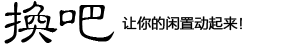
<style>
.page{position:relative;width:300px;height:46px;background:#ffffff}
.page>*{position:absolute;margin:0}
.t1{font:62px "STLibian-SC-Regular";letter-spacing:-0.1em;color:#000000}
.t2{font:14px "FZLTXHK--GBK1-0";color:#000000;font-weight:bold}
</style>
<div class="page">
<p class="t1" style="left:4px;top:1px;width:111px;height:43px">换吧</p>
<p class="t2" style="left:122px;top:16px;width:120px;height:15px">让你的闲置动起来！</p>
</div>
